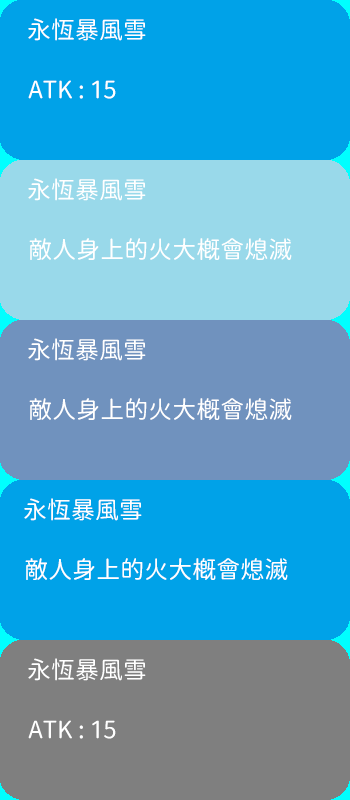
<style>
.page{position:relative;width:350px;height:800px;background:#00a2e8}
.page>*{position:absolute;margin:0}
.t1{font:24px "GenSenRoundedTW-R";color:#ffffff}
</style>
<div class="page">
<p class="t1" style="left:28px;top:18px;width:118px;height:23px">永恆暴風雪</p>
<p class="t1" style="left:28px;top:80px;width:88px;height:19px">ATK : 15</p>
<p class="t1" style="left:28px;top:178px;width:118px;height:23px">永恆暴風雪</p>
<p class="t1" style="left:29px;top:238px;width:263px;height:22px">敵人身上的火大概會熄滅</p>
<p class="t1" style="left:28px;top:338px;width:118px;height:23px">永恆暴風雪</p>
<p class="t1" style="left:29px;top:398px;width:263px;height:22px">敵人身上的火大概會熄滅</p>
<p class="t1" style="left:24px;top:498px;width:118px;height:23px">永恆暴風雪</p>
<p class="t1" style="left:25px;top:558px;width:263px;height:22px">敵人身上的火大概會熄滅</p>
<p class="t1" style="left:28px;top:658px;width:118px;height:23px">永恆暴風雪</p>
<p class="t1" style="left:28px;top:720px;width:88px;height:19px">ATK : 15</p>
</div>
